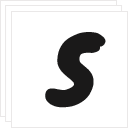
<style>
.page{position:relative;width:128px;height:128px;background:#ffffff}
.page>*{position:absolute;margin:0}
.t1{font:90px "Knewave-Regular";color:#1a1919}
</style>
<div class="page">
<p class="t1" style="left:45px;top:32px;width:61px;height:76px">S</p>
</div>
